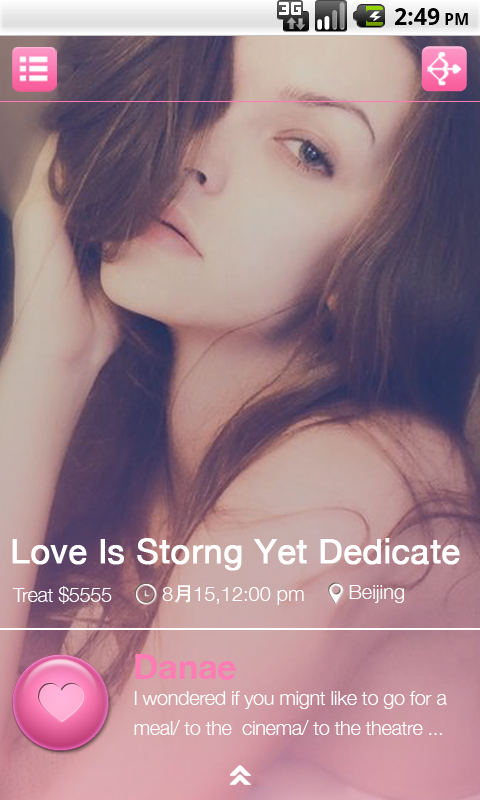
<style>
.page{position:relative;width:480px;height:800px}
.page>*{position:absolute;margin:0}
.t1{font:34px "HelveticaNeue";color:#ffffff;font-weight:bold}
.t2{font:20px "HelveticaNeue-Light";letter-spacing:-0.02em;color:#ffffff}
.t3{font:20px "HelveticaNeue-Light";color:#ffffff}
.t4{font:20px "AdobeHeitiStd-Regular";color:#ffffff}
.t5{font:34px "HelveticaNeue-Bold";color:#fc7cb3}
.t6{font:20px/30px "HelveticaNeue-Light";letter-spacing:-0.02em;color:#ffffff}
</style>
<div class="page">
<p class="t1" style="left:12px;top:538px;width:448px;height:33px">Love Is Storng Yet Dedicate</p>
<p class="t2" style="left:12px;top:586px;width:100px;height:18px">Treat $5555</p>
<p class="t3" style="left:162px;top:585px;width:142px;height:20px">8<span class="t4">月</span>15,12:00 pm</p>
<p class="t3" style="left:349px;top:585px;width:55px;height:18px">Beijing</p>
<p class="t5" style="left:135px;top:654px;width:101px;height:26px">Danae</p>
<p class="t6" style="left:134px;top:691px;width:313px;height:44px">I wondered if you mignt like to go for a <br>  meal/ to the  cinema/ to the theatre ...</p>
</div>
